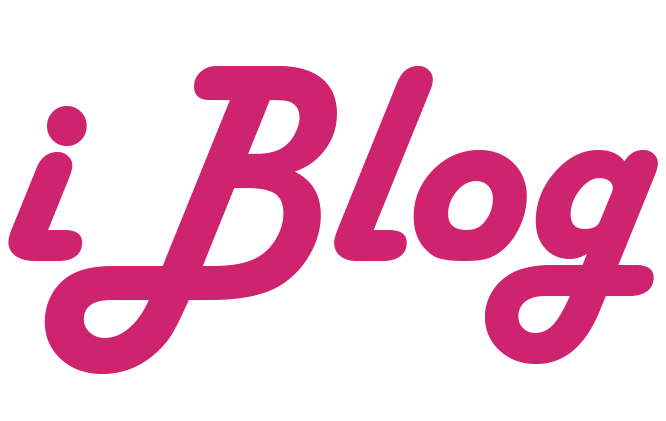
<style>
.page{position:relative;width:666px;height:421px;background:#ffffff}
.page>*{position:absolute;margin:0}
.t1{font:291.7px "HarlowSolid";color:#ce236f}
</style>
<div class="page">
<p class="t1" style="left:8px;top:66px;width:650px;height:308px">iBlog</p>
</div>
